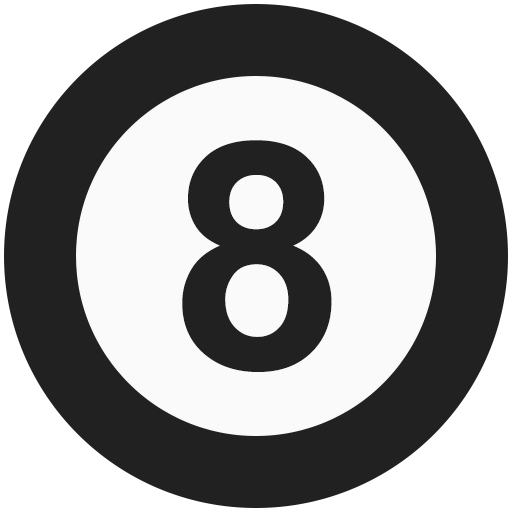
<style>
.page{position:relative;width:512px;height:512px;background:#212121}
.page>*{position:absolute;margin:0}
.t1{font:316.7px "Arial-BoldMT";letter-spacing:0.02em;color:#212121}
</style>
<div class="page">
<p class="t1" style="left:182px;top:140px;width:150px;height:232px">8</p>
</div>
